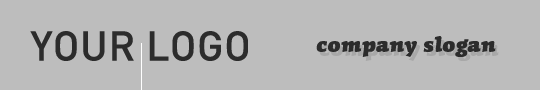
<style>
.page{position:relative;width:540px;height:90px;background:#bdbdbd}
.page>*{position:absolute;margin:0}
.t1{font:41px "DINCE-Medium";letter-spacing:0.02em;color:#2c2c2c;text-transform:uppercase}
.t2{font:24px "CongaBravaStd-Black";letter-spacing:0.02em;color:#2c2c2c}
</style>
<div class="page">
<p class="t1" style="left:30px;top:31px;width:218px;height:30px">YOUR LOGO</p>
<p class="t2" style="left:316px;top:36px;width:180px;height:21px">company slogan</p>
</div>
